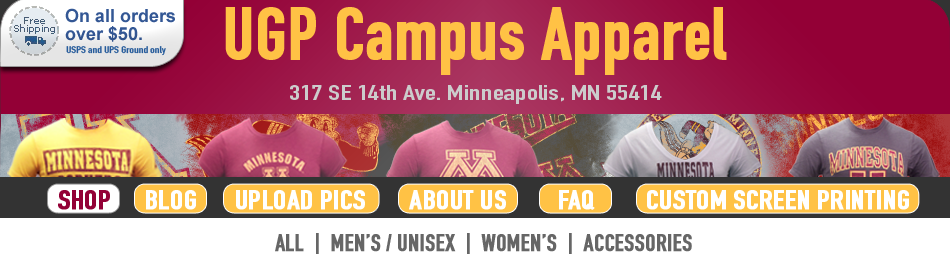
<style>
.page{position:relative;width:950px;height:254px}
.page>*{position:absolute;margin:0}
.t1{font:72px "DINEngschrift-Alternate";color:#ffc245;font-weight:bold}
.t2{font:9.6px "DINEngschrift-Alternate";color:#275c9b;scale:1.25 1}
.t3{font:21px "DINEngschrift-Alternate";color:#cccccc;scale:1.43 1}
.t4{font:27px "DINEngschrift-Alternate";color:#930036;font-weight:bold;scale:1.11 1}
.t5{font:27px "DINEngschrift-Alternate";color:#ffffff;font-weight:bold;scale:1.11 1}
</style>
<div class="page">
<p class="t1" style="left:225px;top:7px;width:502px;height:68px">UGP Campus Apparel</p>
<p class="t2" style="left:66px;top:46px;width:100px;height:10px">USPS and UPS Ground only</p>
<p class="t3" style="left:290px;top:85px;width:372px;height:19px">317 SE 14th Ave. Minneapolis, MN 55414</p>
<p class="t4" style="left:58px;top:190px;width:52px;height:20px">SHOP</p>
<p class="t5" style="left:146px;top:190px;width:50px;height:20px">BLOG</p>
<p class="t5" style="left:236px;top:190px;width:129px;height:20px">UPLOAD PICS</p>
<p class="t5" style="left:409px;top:190px;width:97px;height:20px">ABOUT US</p>
<p class="t5" style="left:559px;top:190px;width:36px;height:20px">FAQ</p>
<p class="t5" style="left:647px;top:190px;width:262px;height:20px">CUSTOM SCREEN PRINTING</p>
</div>
